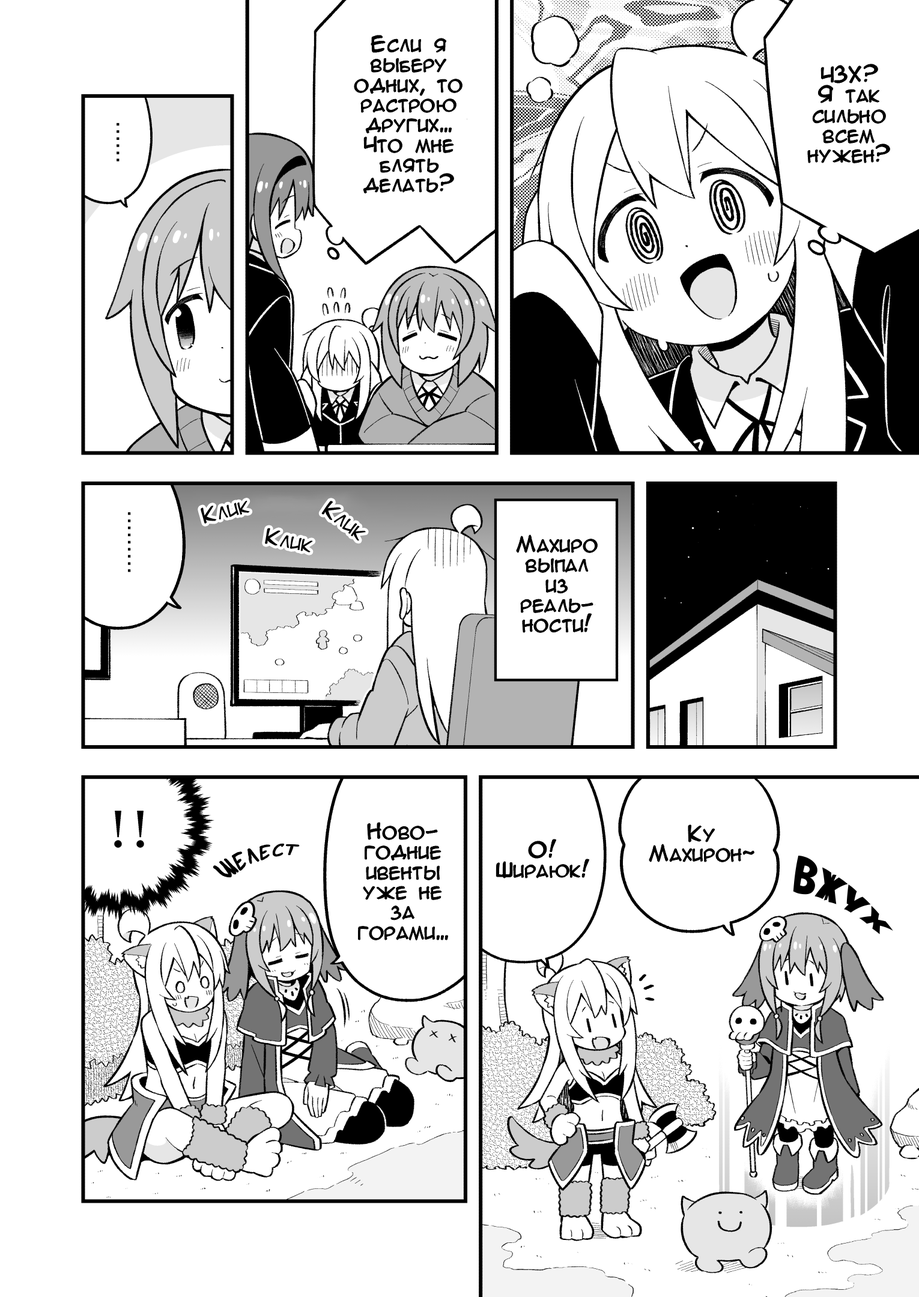
<style>
.page{position:relative;width:919px;height:1297px;background:#ffffff}
.page>*{position:absolute;margin:0}
.t1{font:20px/20px "AnimeAcev3";color:#000000}
.t2{font:20px "AnimeAcev3";color:#000000}
.t3{font:20px "SuperWebcomicBros.Rusbyyakustick";color:#000000}
.t4{font:35px "AvengeanceMArusbyaLiNcE";color:#000000;scale:1.06 1}
</style>
<div class="page">
<p class="t1" style="left:354px;top:35px;width:109px;height:158px;text-align:center">Если я<br>выберу<br>одних, то<br>растрою<br>других...<br>Что мне<br>блять<br>делать?</p>
<p class="t1" style="left:808px;top:64px;width:82px;height:99px;text-align:center">ЧЗХ?<br>Я так<br>сильно<br>всем<br>нужен?</p>
<p class="t2" style="left:201px;top:501px;width:49px;height:23px;rotate:-14deg">Клик</p>
<p class="t2" style="left:321px;top:501px;width:45px;height:40px;rotate:37deg">Клик</p>
<p class="t2" style="left:265px;top:528px;width:48px;height:25px;rotate:11deg">Клик</p>
<p class="t1" style="left:517px;top:535px;width:81px;height:98px;text-align:center">Махиро<br>выпал<br>из<br>реаль-<br>ности!</p>
<p class="t1" style="left:358px;top:823px;width:90px;height:118px;text-align:center">Ново-<br>годние<br>ивенты<br>уже не<br>за<br>горами...</p>
<p class="t1" style="left:649px;top:825px;width:105px;height:38px;text-align:center">Ку<br>Махирон~</p>
<p class="t3" style="left:213px;top:844px;width:86px;height:34px;rotate:-16deg">Шелест</p>
<p class="t1" style="left:496px;top:840px;width:93px;height:38px;text-align:center">О!<br>Шираюк!</p>
<p class="t4" style="left:793px;top:856px;width:100px;height:79px;rotate:32deg">Вжух</p>
</div>
